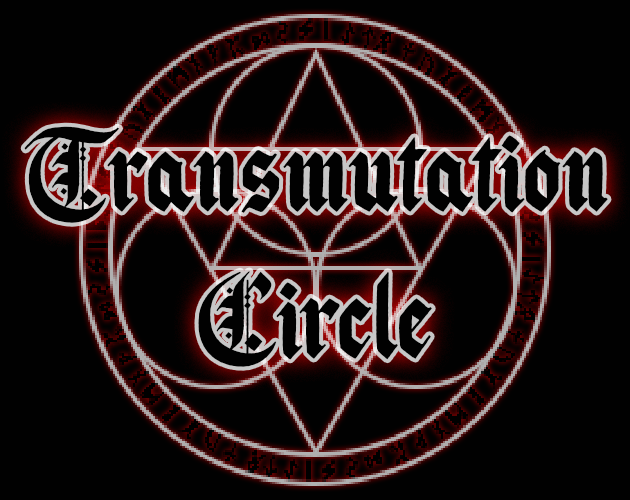
<style>
.page{position:relative;width:630px;height:500px;background:#010101}
.page>*{position:absolute;margin:0}
.t1{font:123px "Pauthe1st-Regular";color:#010101}
</style>
<div class="page">
<p class="t1" style="left:24px;top:126px;width:584px;height:241px;text-align:center">Transmutation<br>Circle</p>
</div>
